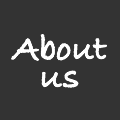
<style>
.page{position:relative;width:120px;height:120px;background:#333333}
.page>*{position:absolute;margin:0}
.t1{font:36px/28px "BradleyHandITCTT-Bold";color:#ffffff}
</style>
<div class="page">
<p class="t1" style="left:11px;top:34px;width:96px;height:54px;text-align:center">About<br>us</p>
</div>
